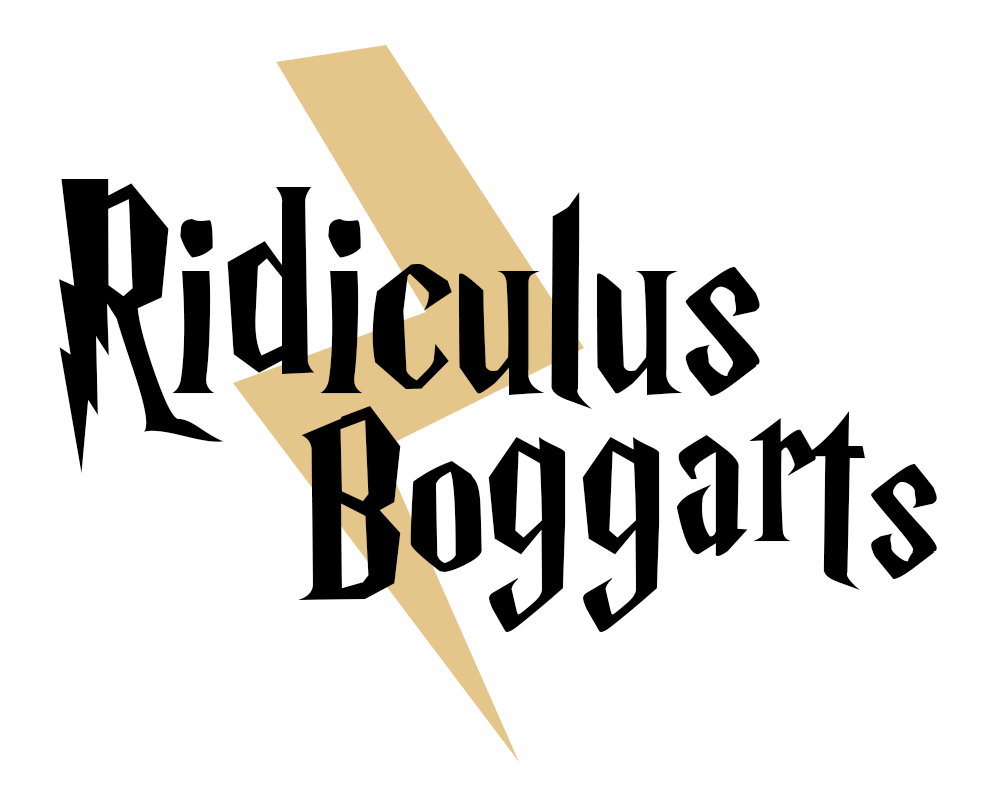
<style>
.page{position:relative;width:1000px;height:790px;background:#ffffff}
.page>*{position:absolute;margin:0}
.t1{font:304px "HarryP";color:#000000}
.t2{font:270.4px "HarryP";color:#000000}
</style>
<div class="page">
<p class="t1" style="left:58px;top:179px;width:702px;height:294px">Ridiculus</p>
<p class="t2" style="left:298px;top:406px;width:639px;height:226px">Boggarts</p>
</div>
